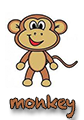
<style>
.page{position:relative;width:84px;height:120px;background:#ffffff}
.page>*{position:absolute;margin:0}
.t1{font:18.1px "Chalkduster";color:#bf7548;scale:0.81 1}
</style>
<div class="page">
<p class="t1" style="left:10px;top:95px;width:65px;height:23px">monkey</p>
</div>
